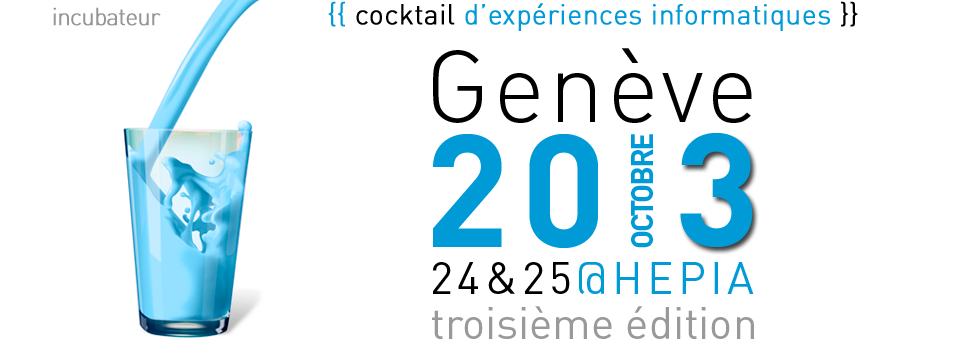
<style>
.page{position:relative;width:970px;height:350px;background:#ffffff}
.page>*{position:absolute;margin:0}
.t1{font:100px "DIN-LightAlternate";letter-spacing:0.03em;color:#000000}
.t2{font:158px "DIN-Bold";letter-spacing:0.07em;color:#009ad7}
.t3{font:30px "DIN-Bold";letter-spacing:-0.08em;color:#009ad7;text-transform:uppercase}
.t4{font:44px "DIN-Regular";letter-spacing:0.1em;color:#009ad6}
.t5{font:44px "DIN-Regular";letter-spacing:0.1em;color:#000000}
.t6{font:44px "DIN-Regular";color:#999999}
</style>
<div class="page">
<p class="t1" style="left:433px;top:48px;width:319px;height:75px">Genève</p>
<p class="t2" style="left:433px;top:134px;width:165px;height:114px">20</p>
<p class="t3" style="left:631px;top:134px;width:22px;height:114px;rotate:-90deg">octobre</p>
<p class="t2" style="left:680px;top:133px;width:73px;height:114px">3</p>
<p class="t4" style="left:433px;top:262px;width:321px;height:32px"><span class="t5">24&amp;25</span>@HEPIA</p>
<p class="t6" style="left:432px;top:306px;width:322px;height:33px">troisième édition</p>
</div>
